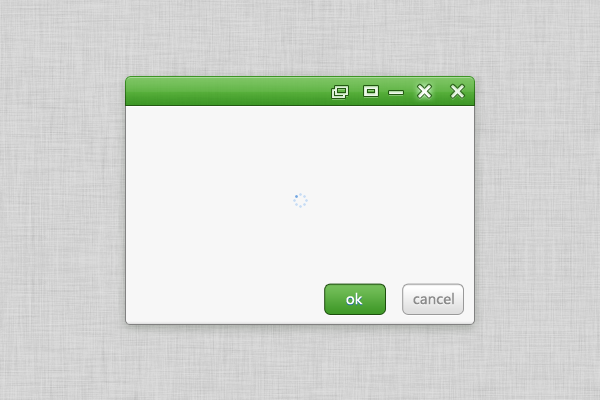
<style>
.page{position:relative;width:600px;height:400px;background:#f7f7f7}
.page>*{position:absolute;margin:0}
.t1{font:14px "MicrosoftYaHei";color:#ffffff}
.t2{font:14px "MicrosoftYaHei";color:#8b8b8b}
</style>
<div class="page">
<p class="t1" style="left:346px;top:292px;width:17px;height:13px">ok</p>
<p class="t2" style="left:413px;top:292px;width:41px;height:13px">cancel</p>
</div>
